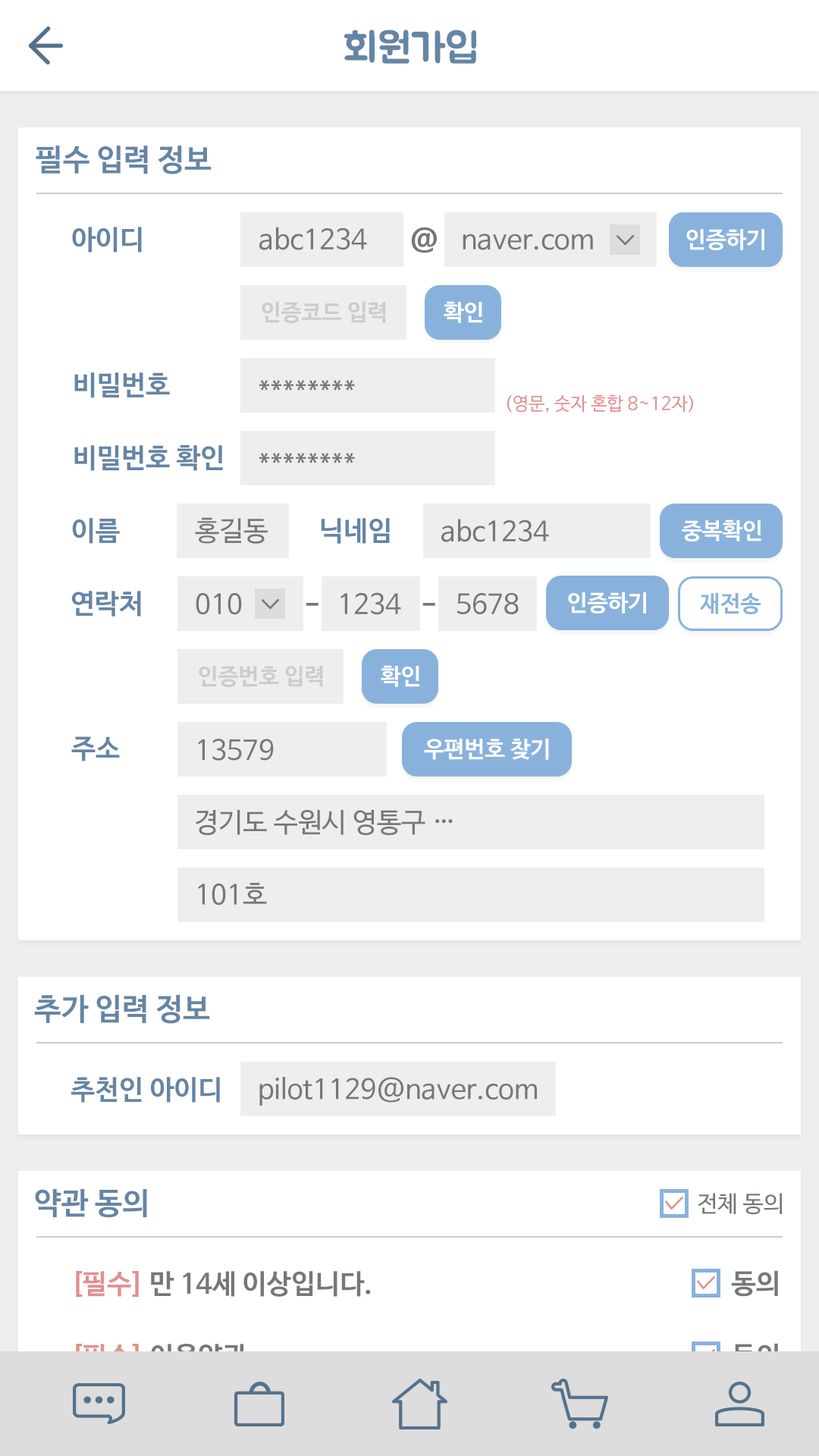
<style>
.page{position:relative;width:819px;height:1456px;background:#ffffff}
.page>*{position:absolute;margin:0}
.t1{font:40.9px "BMJUA";color:#6585a5}
.t2{font:30.3px "NanumBarunGothicBold";color:#6585a5}
.t3{font:27.3px "NanumBarunGothicBold";color:#6585a5}
.t4{font:27.3px "NanumBarunGothic";color:#777777}
.t5{font:27.3px "NanumBarunGothicBold";color:#777777}
.t6{font:22.7px "NanumBarunGothicBold";color:#ffffff}
.t7{font:22.7px "NanumBarunGothicBold";color:#cccccc}
.t8{font:18.2px "NanumBarunGothic";color:#e28f8f}
.t9{font:22.7px "NanumBarunGothicBold";color:#88b2dc}
.t10{font:22.7px "NanumBarunGothic";color:#777777}
.t11{font:27.3px "NanumBarunGothicBold";color:#e28f8f}
.t12{font:27.3px "NanumBarunGothicBold";color:#dddddd}
.t13{font:27.3px "NanumBarunGothicBold";color:#dddddd;text-decoration:underline}
</style>
<div class="page">
<p class="t1" style="left:344px;top:30px;width:132px;height:34px">회원가입</p>
<p class="t2" style="left:36px;top:146px;width:176px;height:28px">필수 입력 정보</p>
<p class="t3" style="left:72px;top:227px;width:70px;height:26px">아이디</p>
<p class="t4" style="left:259px;top:227px;width:108px;height:23px">abc1234</p>
<p class="t5" style="left:411px;top:227px;width:26px;height:26px">@</p>
<p class="t4" style="left:463px;top:234px;width:130px;height:16px">naver.com</p>
<p class="t6" style="left:686px;top:229px;width:78px;height:21px">인증하기</p>
<p class="t7" style="left:262px;top:302px;width:124px;height:21px">인증코드 입력</p>
<p class="t6" style="left:444px;top:301px;width:38px;height:22px">확인</p>
<p class="t3" style="left:74px;top:372px;width:96px;height:26px">비밀번호</p>
<p class="t4" style="left:259px;top:380px;width:96px;height:11px">********</p>
<p class="t8" style="left:507px;top:395px;width:186px;height:18px">(영문, 숫자 혼합 8~12자)</p>
<p class="t3" style="left:74px;top:445px;width:149px;height:26px">비밀번호 확인</p>
<p class="t4" style="left:259px;top:453px;width:96px;height:10px">********</p>
<p class="t3" style="left:72px;top:518px;width:48px;height:26px">이름</p>
<p class="t4" style="left:195px;top:517px;width:73px;height:27px">홍길동</p>
<p class="t3" style="left:321px;top:518px;width:69px;height:26px">닉네임</p>
<p class="t4" style="left:441px;top:519px;width:108px;height:23px">abc1234</p>
<p class="t6" style="left:682px;top:519px;width:79px;height:22px">중복확인</p>
<p class="t3" style="left:71px;top:591px;width:70px;height:26px">연락처</p>
<p class="t4" style="left:196px;top:593px;width:46px;height:22px">010</p>
<p class="t4" style="left:340px;top:592px;width:61px;height:23px">1234</p>
<p class="t4" style="left:457px;top:593px;width:62px;height:21px">5678</p>
<p class="t6" style="left:568px;top:592px;width:78px;height:21px">인증하기</p>
<p class="t9" style="left:700px;top:593px;width:61px;height:21px">재전송</p>
<p class="t5" style="left:306px;top:603px;width:12px;height:3px">-</p>
<p class="t5" style="left:422px;top:603px;width:13px;height:3px">-</p>
<p class="t7" style="left:199px;top:666px;width:124px;height:21px">인증번호 입력</p>
<p class="t6" style="left:381px;top:665px;width:38px;height:22px">확인</p>
<p class="t3" style="left:71px;top:736px;width:49px;height:25px">주소</p>
<p class="t4" style="left:198px;top:739px;width:76px;height:22px">13579</p>
<p class="t6" style="left:424px;top:739px;width:125px;height:21px">우편번호 찾기</p>
<p class="t4" style="left:195px;top:810px;width:258px;height:26px">경기도 수원시 영통구 …</p>
<p class="t4" style="left:198px;top:883px;width:69px;height:22px">101호</p>
<p class="t2" style="left:34px;top:995px;width:176px;height:29px">추가 입력 정보</p>
<p class="t3" style="left:71px;top:1077px;width:149px;height:26px">추천인 아이디</p>
<p class="t4" style="left:259px;top:1077px;width:278px;height:29px">pilot1129@naver.com</p>
<p class="t2" style="left:35px;top:1189px;width:112px;height:29px">약관 동의</p>
<p class="t10" style="left:698px;top:1193px;width:84px;height:22px">전체 동의</p>
<p class="t5" style="left:76px;top:1271px;width:295px;height:26px"><span class="t11">[필수]</span> 만 14세 이상입니다.</p>
<p class="t5" style="left:731px;top:1270px;width:47px;height:27px">동의</p>
<p class="t12" style="left:76px;top:1344px;width:171px;height:30px">[필수] <span class="t13">이용약관</span></p>
<p class="t12" style="left:731px;top:1343px;width:47px;height:27px">동의</p>
</div>
